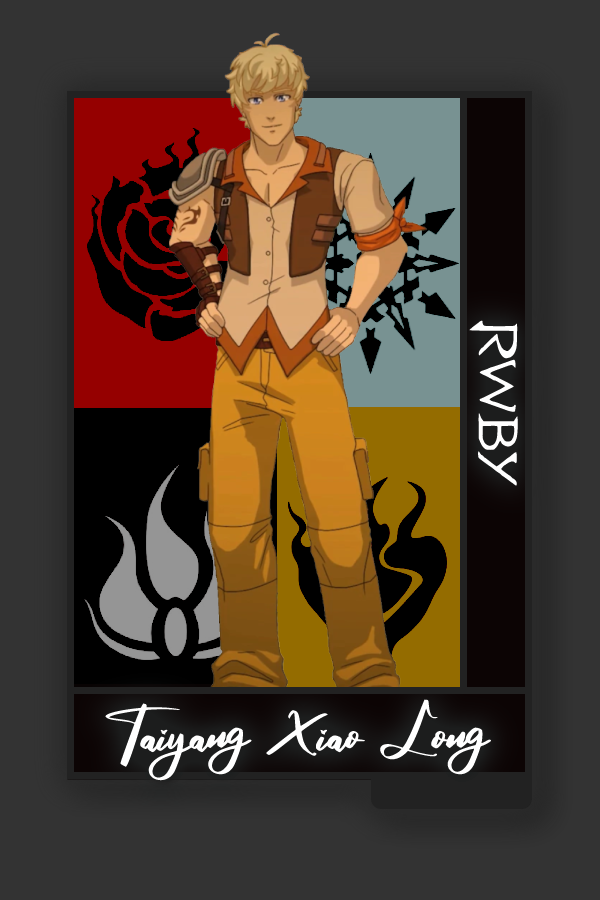
<style>
.page{position:relative;width:600px;height:900px;background:#333333}
.page>*{position:absolute;margin:0}
.t1{font:61.3px "RWBY_Style";color:#ffffff;scale:1.25 1}
.t2{font:76.6px "RosegaFREE";color:#ffffff;scale:0.91 1}
</style>
<div class="page">
<p class="t1" style="left:469px;top:320px;width:49px;height:166px;rotate:90deg">RWBY</p>
<p class="t2" style="left:105px;top:699px;width:387px;height:87px">Taiyang Xiao Long</p>
</div>
